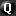
<style>
.page{position:relative;width:16px;height:16px;background:#333333}
.page>*{position:absolute;margin:0}
.t1{font:12.1px "Tahoma-Bold";color:#ffffff;scale:0.91 1}
</style>
<div class="page">
<p class="t1" style="left:4px;top:3px;width:7px;height:11px">Q</p>
</div>
